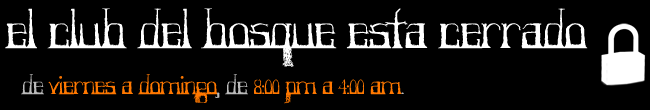
<style>
.page{position:relative;width:650px;height:110px;background:#000000}
.page>*{position:absolute;margin:0}
.t1{font:48px "Forestry";color:#ffffff}
.t2{font:24px "Forestry";color:#ff7800}
.t3{font:24px "Forestry";color:#bbbbbb}
</style>
<div class="page">
<p class="t1" style="left:5px;top:8px;width:583px;height:59px">el club del bosque esta cerrado</p>
<p class="t2" style="left:21px;top:74px;width:383px;height:30px"><span class="t3">de </span>viernes a domingo<span class="t3">, de </span>8:00 pm a 4:00 am<span class="t3">.</span></p>
</div>
